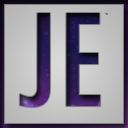
<style>
.page{position:relative;width:128px;height:128px}
.page>*{position:absolute;margin:0}
.t1{font:150px "TwCenMT-Condensed"}
</style>
<div class="page">
<p class="t1" style="left:19px;top:13px;width:82px;height:94px">JE</p>
</div>
